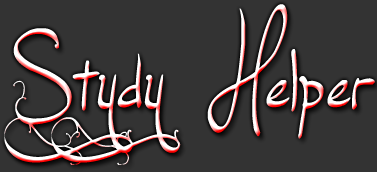
<style>
.page{position:relative;width:377px;height:172px;background:#333333}
.page>*{position:absolute;margin:0}
.t1{font:150px "Jellyka,-End_less-Voyage"}
</style>
<div class="page">
<p class="t1" style="left:4px;top:4px;width:371px;height:161px">Stydy Helper</p>
</div>
